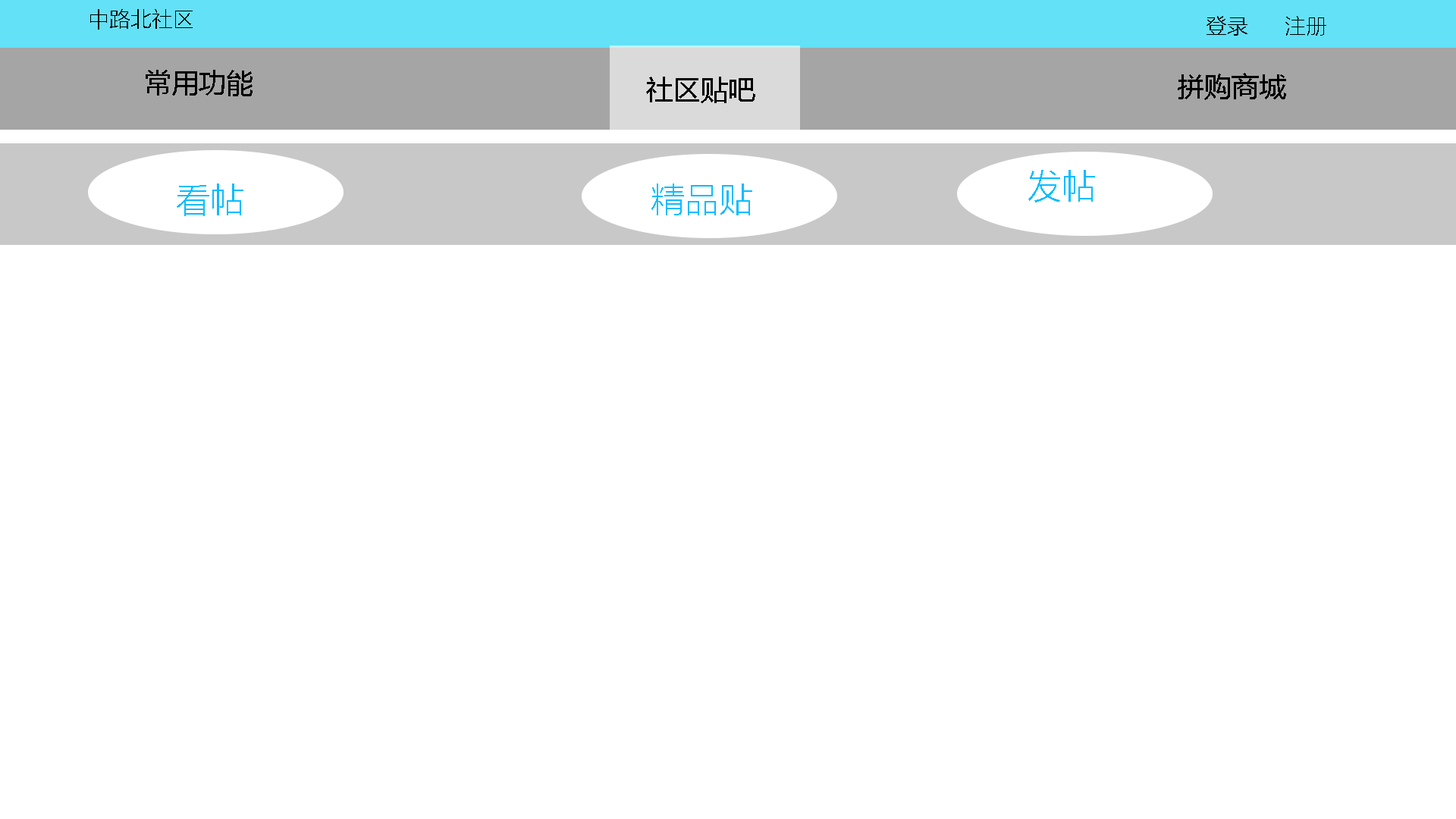
<style>
.page{position:relative;width:1456px;height:819px;background:#ffffff}
.page>*{position:absolute;margin:0}
.t1{font:21.2px "MicrosoftYaHeiLight";color:#000000}
.t2{font:27.3px "MicrosoftYaHei";color:#000000}
.t3{font:34.1px "MicrosoftYaHeiLight";color:#07bcff}
</style>
<div class="page">
<p class="t1" style="left:90px;top:9px;width:103px;height:21px">中路北社区</p>
<p class="t1" style="left:1206px;top:16px;width:120px;height:20px">登录      注册</p>
<p class="t2" style="left:146px;top:70px;width:107px;height:26px">常用功能</p>
<p class="t2" style="left:646px;top:77px;width:109px;height:26px">社区贴吧</p>
<p class="t2" style="left:1178px;top:73px;width:108px;height:27px">拼购商城</p>
<p class="t3" style="left:1028px;top:170px;width:67px;height:32px">发帖</p>
<p class="t3" style="left:177px;top:184px;width:66px;height:32px">看帖</p>
<p class="t3" style="left:651px;top:184px;width:101px;height:31px">精品贴</p>
</div>
